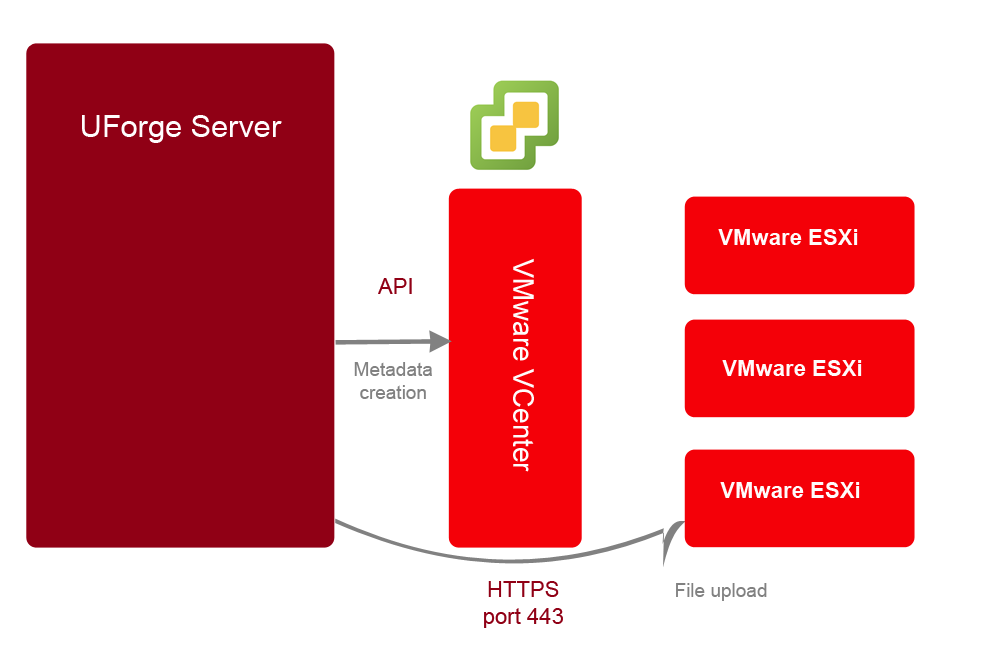
<style>
.page{position:relative;width:1000px;height:667px;background:#ffffff}
.page>*{position:absolute;margin:0}
.t1{font:30.7px "ArialMT";color:#fffdfd}
.t2{font:22.2px "Arial-BoldMT";color:#fefbfb}
.t3{font:28.5px "ArialMT";color:#fefbfb}
.t4{font:22.2px "ArialMT";color:#900015}
.t5{font:19px "ArialMT";color:#818181}
</style>
<div class="page">
<p class="t1" style="left:82px;top:115px;width:200px;height:28px">UForge Server</p>
<p class="t2" style="left:718px;top:229px;width:140px;height:16px">VMware ESXi</p>
<p class="t3" style="left:513px;top:258px;width:21px;height:214px;rotate:90deg">VMware VCenter</p>
<p class="t4" style="left:378px;top:278px;width:34px;height:16px">API</p>
<p class="t5" style="left:354px;top:362px;width:78px;height:37px;text-align:center">Metadata<br>creation</p>
<p class="t2" style="left:722px;top:360px;width:140px;height:16px">VMware ESXi</p>
<p class="t2" style="left:720px;top:482px;width:140px;height:16px">VMware ESXi</p>
<p class="t4" style="left:484px;top:581px;width:79px;height:47px;text-align:center">HTTPS<br>port 443</p>
<p class="t5" style="left:676px;top:583px;width:91px;height:18px">File upload</p>
</div>
